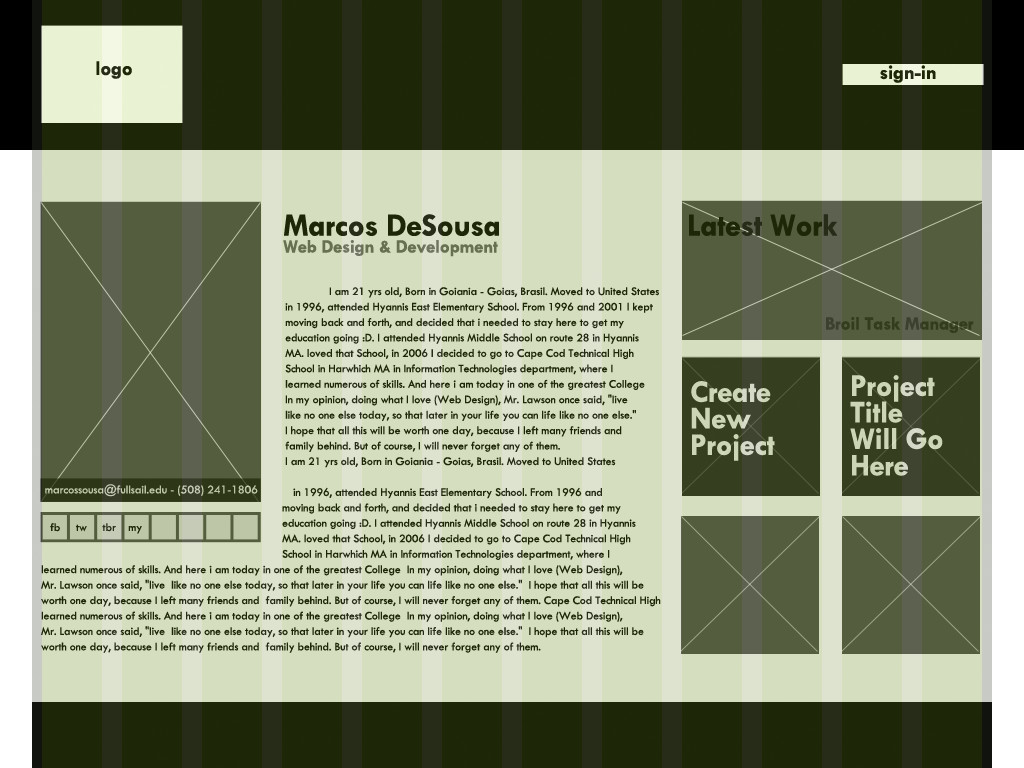
<style>
.page{position:relative;width:1024px;height:768px}
.page>*{position:absolute;margin:0}
.t1{font:20.8px "TwCenMT-Bold";letter-spacing:-0.015em;color:#262c18}
.t2{font:20.8px "TwCenMT-Bold";letter-spacing:-0.015em;color:#1d2707}
.t3{font:32.7px "TwCenMT-Bold";letter-spacing:-0.015em;color:#1d2707}
.t4{font:19.1px "TwCenMT-Bold";letter-spacing:-0.015em;color:#677151}
.t5{font:12px/15.4px "TwCenMT-Regular";letter-spacing:-0.015em;color:#1d2707}
.t6{font:19.1px "TwCenMT-Bold";letter-spacing:-0.015em;color:#333d1d}
.t7{font:31.6px/26.5px "TwCenMT-Bold";letter-spacing:-0.015em;color:#ccd6b6}
.t8{font:12.5px "TwCenMT-Regular";letter-spacing:-0.015em;color:#bdc6a6}
.t9{font:12px "TwCenMT-Regular";letter-spacing:-0.015em;color:#1d2707}
</style>
<div class="page">
<p class="t1" style="left:96px;top:61px;width:36px;height:18px">logo</p>
<p class="t2" style="left:880px;top:65px;width:56px;height:18px">sign-in</p>
<p class="t3" style="left:284px;top:214px;width:215px;height:22px">Marcos DeSousa</p>
<p class="t3" style="left:689px;top:214px;width:149px;height:22px">Latest Work</p>
<p class="t4" style="left:283px;top:240px;width:215px;height:17px">Web Design &amp; Development</p>
<p class="t5" style="left:41px;top:287px;width:620px;height:366px">I am 21 yrs old, Born in Goiania - Goias, Brasil. Moved to United States <br>               in 1996, attended Hyannis East Elementary School. From 1996 and 2001 I kept<br>               moving back and forth, and decided that i needed to stay here to get my <br>               education going :D. I attended Hyannis Middle School on route 28 in Hyannis <br>               MA. loved that School, in 2006 I decided to go to Cape Cod Technical High <br>               School in Harwhich MA in Information Technologies department, where I <br>               learned numerous of skills. And here i am today in one of the greatest College <br>               In my opinion, doing what I love (Web Design), Mr. Lawson once said, "live <br>               like no one else today, so that later in your life you can life like no one else." <br>               I hope that all this will be worth one day, because I left many friends and <br>               family behind. But of course, I will never forget any of them.<br>               I am 21 yrs old, Born in Goiania - Goias, Brasil. Moved to United States <br><br>       in 1996, attended Hyannis East Elementary School. From 1996 and <br>              moving back and forth, and decided that i needed to stay here to get my <br>              education going :D. I attended Hyannis Middle School on route 28 in Hyannis <br>              MA. loved that School, in 2006 I decided to go to Cape Cod Technical High <br>              School in Harwhich MA in Information Technologies department, where I <br>learned numerous of skills. And here i am today in one of the greatest College  In my opinion, doing what I love (Web Design), <br>Mr. Lawson once said, "live  like no one else today, so that later in your life you can life like no one else."  I hope that all this will be <br>worth one day, because I left many friends and  family behind. But of course, I will never forget any of them. Cape Cod Technical High <br>learned numerous of skills. And here i am today in one of the greatest College  In my opinion, doing what I love (Web Design), <br>Mr. Lawson once said, "live  like no one else today, so that later in your life you can life like no one else."  I hope that all this will be <br>worth one day, because I left many friends and  family behind. But of course, I will never forget any of them.</p>
<p class="t6" style="left:826px;top:317px;width:148px;height:16px">Broil Task Manager</p>
<p class="t7" style="left:850px;top:375px;width:93px;height:101px">Project<br>Title<br>Will Go<br>Here</p>
<p class="t7" style="left:691px;top:381px;width:84px;height:80px">Create<br>New<br>Project</p>
<p class="t8" style="left:45px;top:484px;width:213px;height:13px">marcossousa@fullsail.edu - (508) 241-1806</p>
<p class="t9" style="left:50px;top:523px;width:92px;height:11px">fb     tw     tbr    my</p>
</div>
